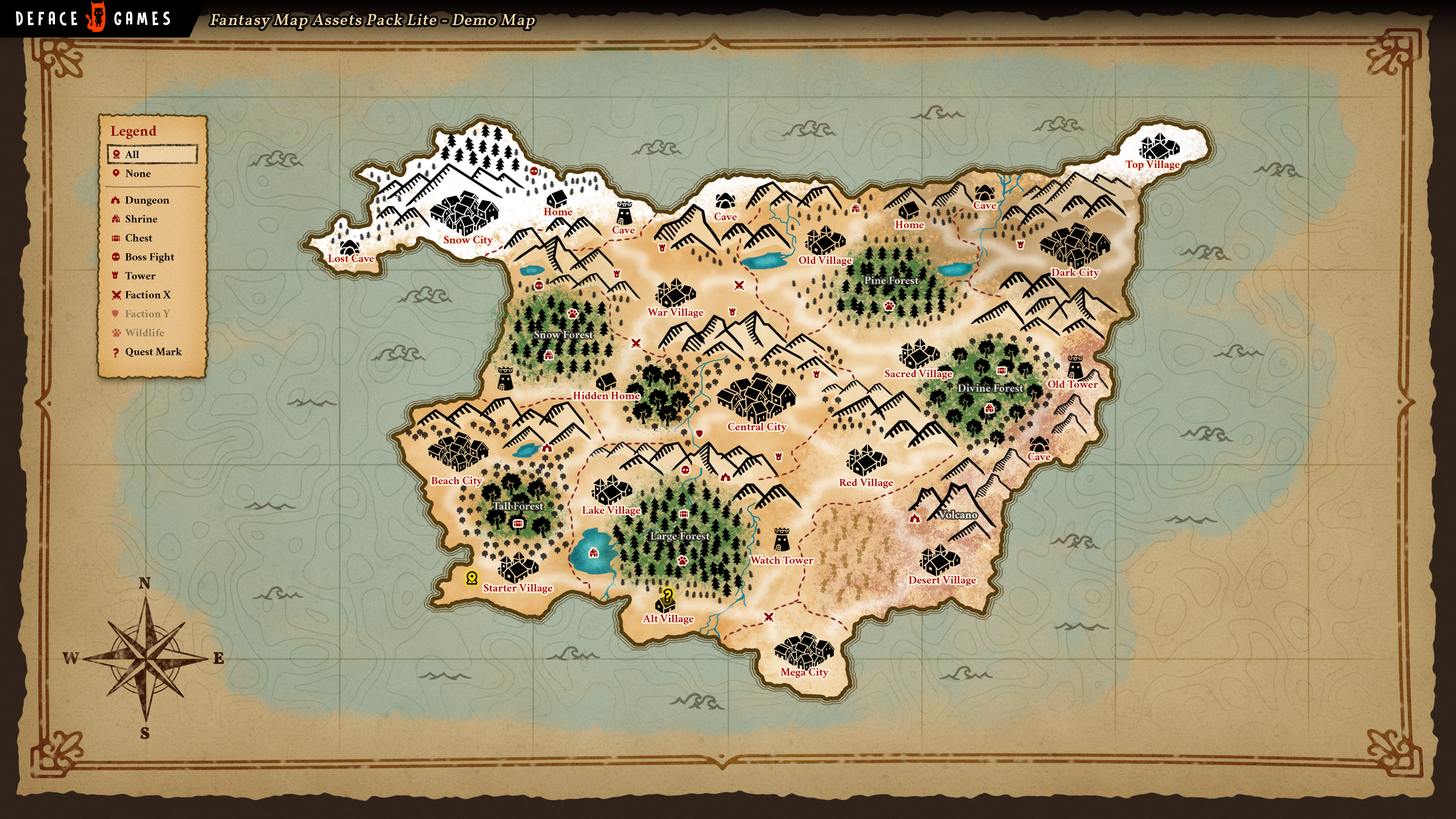
<style>
.page{position:relative;width:1456px;height:819px}
.page>*{position:absolute;margin:0}
.t1{font:15.8px "Vollkorn-Medium";letter-spacing:0.05em;color:#fbd8a4;font-style:italic}
.t2{font:15.2px "Crimson-Bold";color:#8b0707}
.t3{font:11.4px "Crimson-Bold";color:#000000}
.t4{font:11.4px "Crimson-Bold";color:#ac1414}
.t5{font:11.4px "Crimson-Bold"}
.t6{font:11.4px "Crimson-Bold";color:#917954}
.t7{font:11.4px "Crimson-Bold";color:#e0e6da}
.t8{font:11.4px "Crimson-Bold";color:#ffffff}
</style>
<div class="page">
<p class="t1" style="left:210px;top:14px;width:325px;height:15px">Fantasy Map Assets Pack Lite - Demo Map</p>
<p class="t2" style="left:111px;top:126px;width:46px;height:13px">Legend</p>
<p class="t3" style="left:125px;top:151px;width:14px;height:7px">All</p>
<p class="t4" style="left:1126px;top:160px;width:54px;height:10px">Top Village</p>
<p class="t3" style="left:126px;top:169px;width:25px;height:8px">None</p>
<p class="t3" style="left:125px;top:196px;width:44px;height:10px">Dungeon</p>
<p class="t4" style="left:544px;top:208px;width:28px;height:7px">Home</p>
<p class="t4" style="left:974px;top:201px;width:22px;height:8px">Cave</p>
<p class="t3" style="left:126px;top:215px;width:31px;height:8px">Shrine</p>
<p class="t4" style="left:714px;top:213px;width:23px;height:7px">Cave</p>
<p class="t4" style="left:895px;top:221px;width:29px;height:7px">Home</p>
<p class="t3" style="left:126px;top:234px;width:26px;height:8px">Chest</p>
<p class="t4" style="left:612px;top:226px;width:23px;height:8px">Cave</p>
<p class="t4" style="left:444px;top:235px;width:49px;height:11px">Snow City</p>
<p class="t3" style="left:125px;top:253px;width:49px;height:10px">Boss Fight</p>
<p class="t4" style="left:328px;top:254px;width:46px;height:8px">Lost Cave</p>
<p class="t4" style="left:799px;top:256px;width:53px;height:10px">Old Village</p>
<p class="t4" style="left:1051px;top:268px;width:49px;height:10px">Dark City</p>
<p class="t3" style="left:125px;top:272px;width:30px;height:7px">Tower</p>
<p class="t5" style="left:864px;top:276px;width:55px;height:8px">Pine Forest</p>
<p class="t3" style="left:125px;top:290px;width:46px;height:8px">Faction X</p>
<p class="t6" style="left:125px;top:309px;width:45px;height:8px">Faction Y</p>
<p class="t4" style="left:647px;top:308px;width:56px;height:10px">War Village</p>
<p class="t6" style="left:125px;top:328px;width:39px;height:8px">Wildlife</p>
<p class="t7" style="left:534px;top:331px;width:59px;height:7px">Snow Forest</p>
<p class="t3" style="left:126px;top:348px;width:56px;height:9px">Quest Mark</p>
<p class="t4" style="left:885px;top:369px;width:67px;height:11px">Sacred Village</p>
<p class="t5" style="left:958px;top:384px;width:65px;height:8px">Divine Forest</p>
<p class="t4" style="left:1048px;top:380px;width:50px;height:8px">Old Tower</p>
<p class="t4" style="left:573px;top:391px;width:67px;height:8px">Hidden Home</p>
<p class="t4" style="left:728px;top:422px;width:59px;height:11px">Central City</p>
<p class="t4" style="left:1028px;top:453px;width:22px;height:7px">Cave</p>
<p class="t4" style="left:431px;top:476px;width:52px;height:10px">Beach City</p>
<p class="t4" style="left:839px;top:478px;width:54px;height:10px">Red Village</p>
<p class="t5" style="left:493px;top:502px;width:50px;height:8px">Tall Forest</p>
<p class="t4" style="left:582px;top:506px;width:58px;height:10px">Lake Village</p>
<p class="t8" style="left:938px;top:511px;width:39px;height:7px">Volcano</p>
<p class="t5" style="left:650px;top:532px;width:60px;height:10px">Large Forest</p>
<p class="t4" style="left:750px;top:556px;width:63px;height:8px">Watch Tower</p>
<p class="t4" style="left:908px;top:576px;width:68px;height:10px">Desert Village</p>
<p class="t4" style="left:483px;top:584px;width:69px;height:10px">Starter Village</p>
<p class="t4" style="left:643px;top:614px;width:50px;height:10px">Alt Village</p>
<p class="t4" style="left:780px;top:668px;width:49px;height:10px">Mega City</p>
</div>
